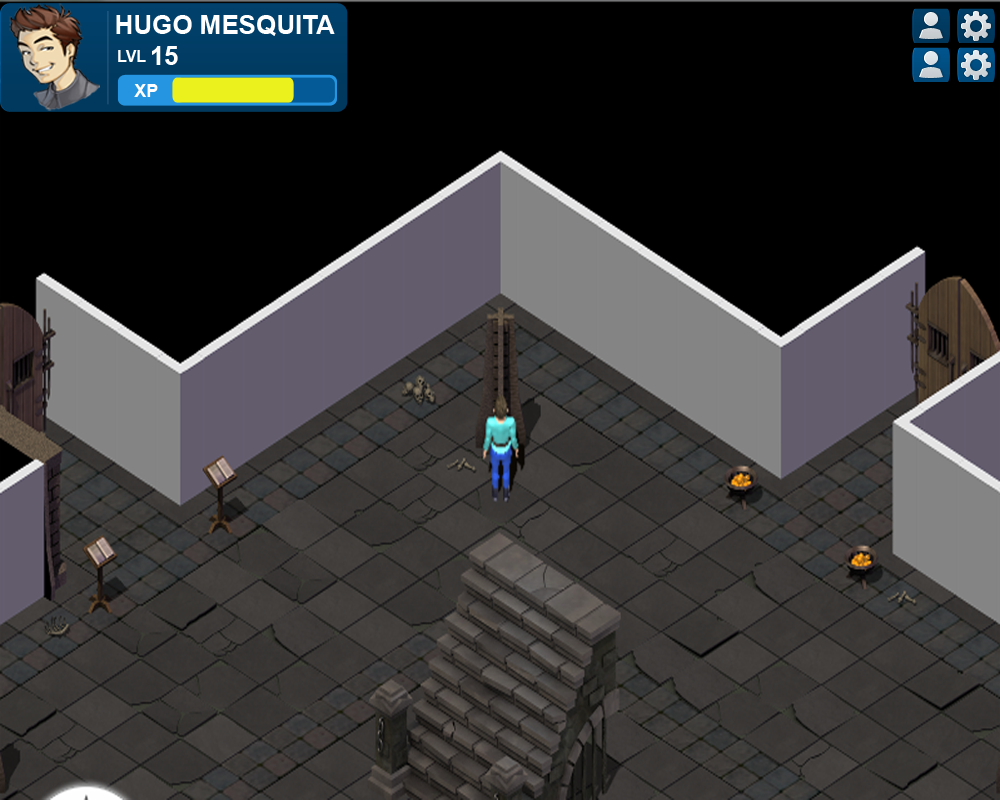
<style>
.page{position:relative;width:1000px;height:800px;background:#000000}
.page>*{position:absolute;margin:0}
.t1{font:26px "Arial-BoldMT";color:#ffffff}
.t2{font:16px "Arial-BoldMT";color:#ffffff}
.t3{font:18px "Arial-BoldMT";color:#ffffff}
</style>
<div class="page">
<p class="t1" style="left:116px;top:15px;width:219px;height:21px">HUGO MESQUITA</p>
<p class="t2" style="left:118px;top:50px;width:28px;height:12px">LVL</p>
<p class="t1" style="left:152px;top:46px;width:26px;height:19px">15</p>
<p class="t3" style="left:134px;top:84px;width:24px;height:13px">XP</p>
</div>
